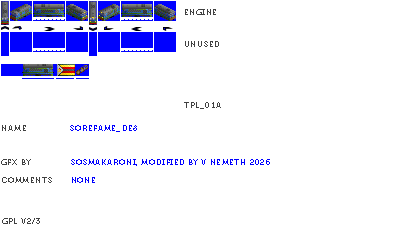
<style>
.page{position:relative;width:400px;height:230px;background:#ffffff}
.page>*{position:absolute;margin:0}
.t1{font:8px "Museo700-Regular";letter-spacing:0.075em;color:#404040;text-transform:uppercase}
.t2{font:8px "Museo700-Regular";letter-spacing:0.075em;color:#0000ff;text-transform:uppercase}
</style>
<div class="page">
<p class="t1" style="left:185px;top:9px;width:31px;height:6px">engine</p>
<p class="t1" style="left:185px;top:41px;width:34px;height:6px">unused</p>
<p class="t1" style="left:184px;top:102px;width:37px;height:7px">tpl_01a</p>
<p class="t1" style="left:2px;top:125px;width:24px;height:6px">name</p>
<p class="t2" style="left:70px;top:125px;width:67px;height:7px">Sorefame_DE8</p>
<p class="t1" style="left:1px;top:159px;width:30px;height:6px">gfx by</p>
<p class="t2" style="left:71px;top:159px;width:199px;height:7px">sosmakaroni, modified by v nemeth 2026</p>
<p class="t1" style="left:2px;top:177px;width:50px;height:6px">comments</p>
<p class="t2" style="left:72px;top:177px;width:23px;height:6px">none</p>
<p class="t1" style="left:2px;top:218px;width:38px;height:6px">gpl v2/3</p>
</div>
